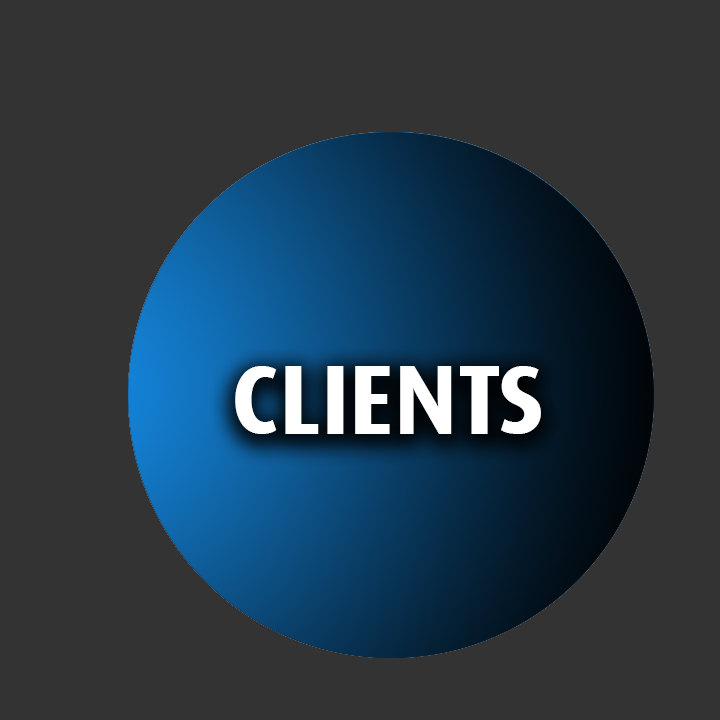
<style>
.page{position:relative;width:720px;height:720px;background:#333333}
.page>*{position:absolute;margin:0}
.t1{font:97px "DaxBold";color:#ffffff}
</style>
<div class="page">
<p class="t1" style="left:235px;top:366px;width:306px;height:68px">CLIENTS</p>
</div>
